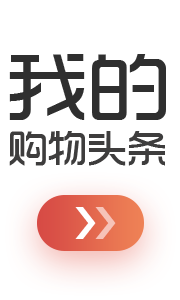
<style>
.page{position:relative;width:180px;height:300px;background:#ffffff}
.page>*{position:absolute;margin:0}
.t1{font:79.3px "TRENDS";color:#2f2f2f;scale:0 1}
.t2{font:41px "TRENDS";color:#3e3d3d;scale:0 1}
.t3{font:89px "MicrosoftYaHei";letter-spacing:-0.573em;color:#ffffff;scale:0 1}
.t4{font:89px "MicrosoftYaHei";letter-spacing:-0.573em;color:#f6c3b8;scale:0 1}
</style>
<div class="page">
<p class="t1" style="left:9px;top:54px;width:157px;height:66px">我的</p>
<p class="t2" style="left:9px;top:131px;width:156px;height:35px">购物头条</p>
<p class="t3" style="left:75px;top:207px;width:21px;height:32px">›</p>
<p class="t4" style="left:95px;top:207px;width:21px;height:32px">›</p>
</div>
